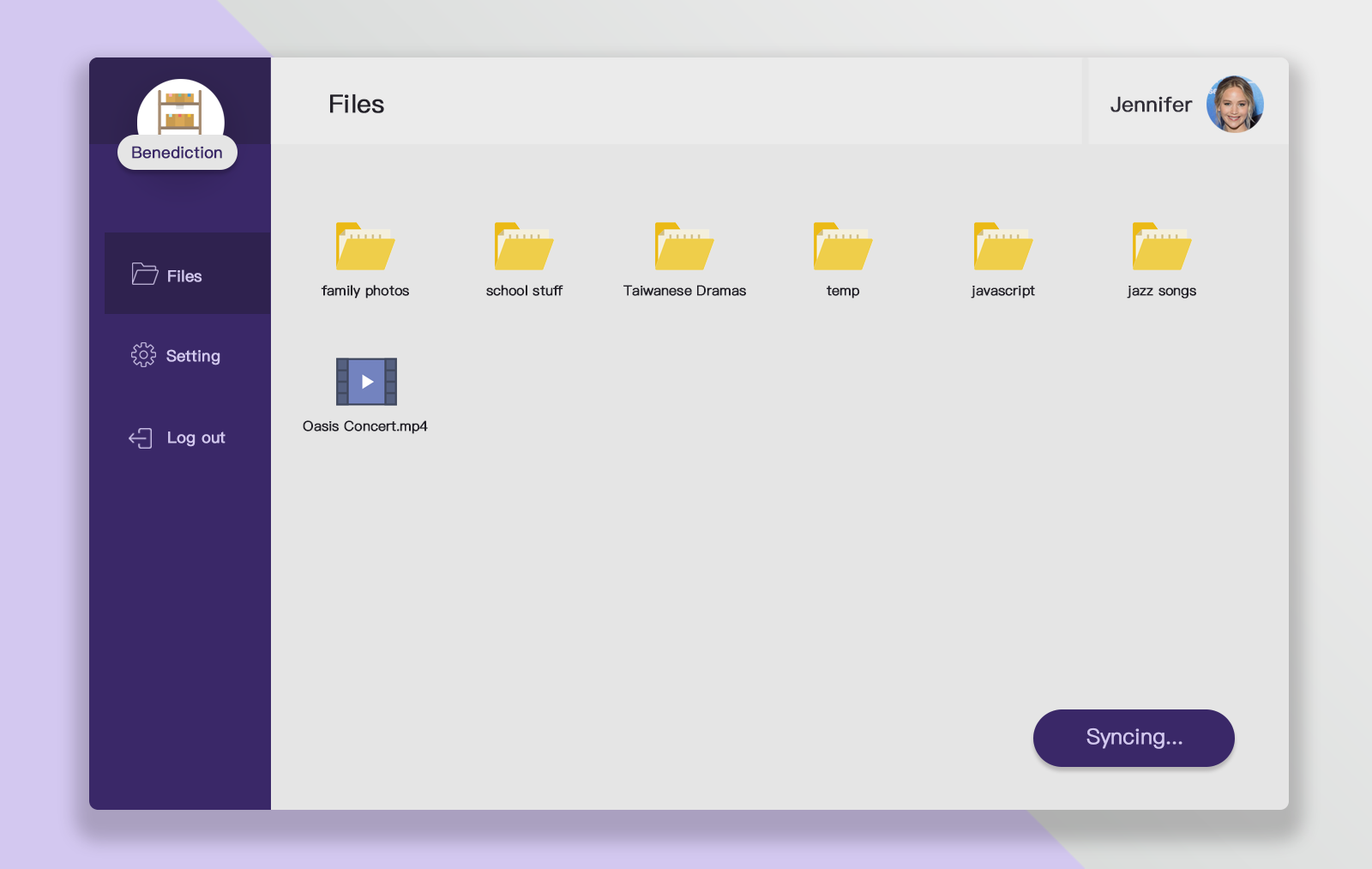
<style>
.page{position:relative;width:1372px;height:869px;background:#e5e5e5}
.page>*{position:absolute;margin:0}
.t1{font:24.9px "PingFangTC-Regular";color:#222028;font-weight:bold}
.t2{font:20.7px "PingFangTC-Regular";color:#302d37;font-weight:bold}
.t3{font:15.9px "PingFangTC-Regular";color:#3a2868;font-weight:bold}
.t4{font:15.4px "PingFangTC-Regular";color:#d3c8f0;font-weight:bold}
.t5{font:13.5px "PingFangTC-Light";color:#222028;font-weight:bold}
.t6{font:21.2px "PingFangTC-Light";color:#d3c8f0;font-weight:bold}
</style>
<div class="page">
<p class="t1" style="left:330px;top:93px;width:54px;height:20px">Files</p>
<p class="t2" style="left:1111px;top:96px;width:82px;height:16px">Jennifer</p>
<p class="t3" style="left:132px;top:146px;width:90px;height:13px">Benediction</p>
<p class="t4" style="left:168px;top:269px;width:34px;height:13px">Files</p>
<p class="t5" style="left:321px;top:285px;width:88px;height:13px">family photos</p>
<p class="t5" style="left:486px;top:285px;width:78px;height:11px">school stuff</p>
<p class="t5" style="left:624px;top:285px;width:122px;height:11px">Taiwanese Dramas</p>
<p class="t5" style="left:827px;top:286px;width:33px;height:12px">temp</p>
<p class="t5" style="left:971px;top:286px;width:64px;height:12px">javascript</p>
<p class="t5" style="left:1127px;top:286px;width:70px;height:12px">jazz songs</p>
<p class="t4" style="left:166px;top:349px;width:54px;height:16px">Setting</p>
<p class="t5" style="left:303px;top:420px;width:125px;height:14px">Oasis Concert.mp4</p>
<p class="t4" style="left:168px;top:431px;width:58px;height:16px">Log out</p>
<p class="t6" style="left:1087px;top:727px;width:96px;height:22px">Syncing...</p>
</div>
